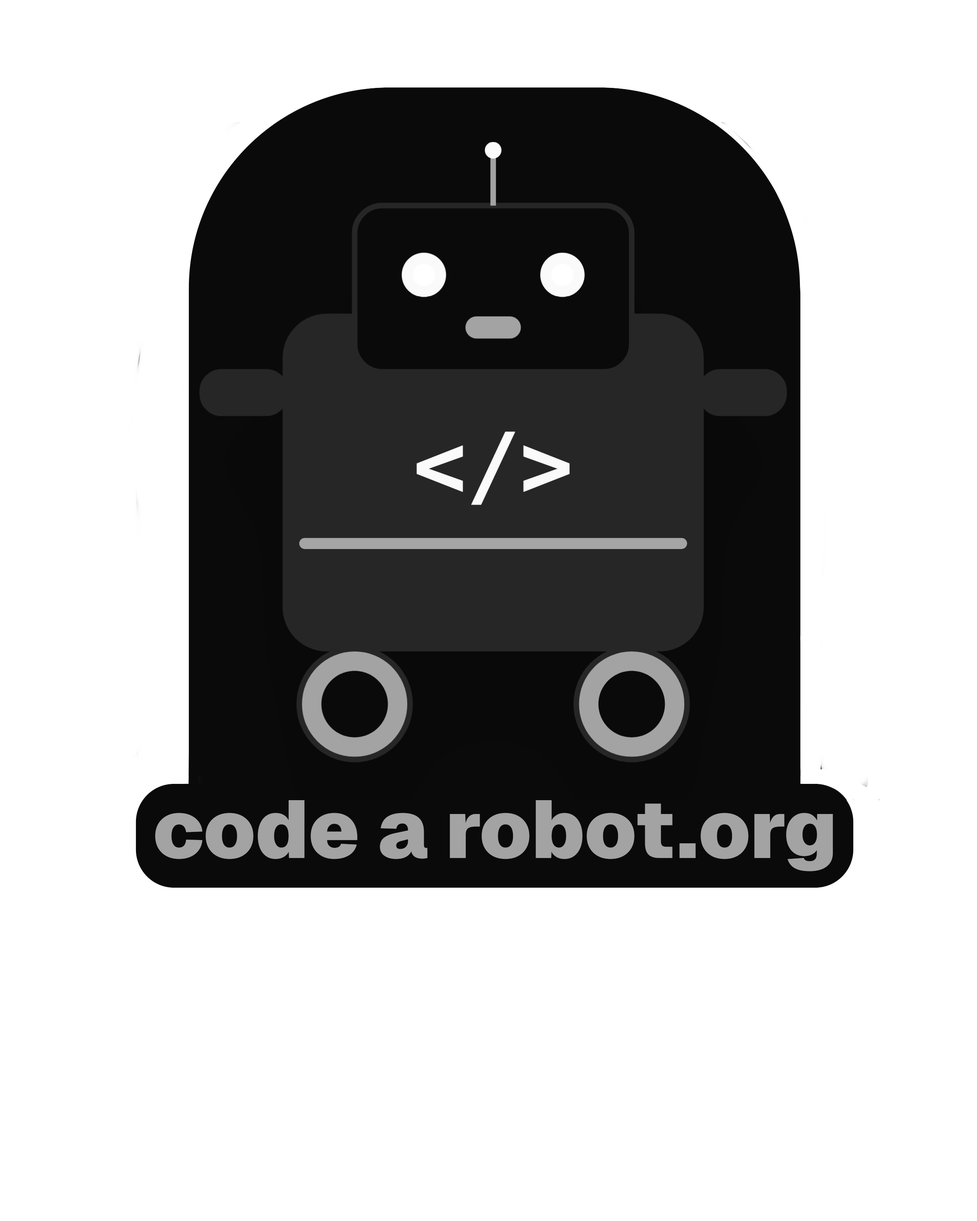
<style>
.page{position:relative;width:977px;height:1221px;background:#ffffff}
.page>*{position:absolute;margin:0}
.t1{font:81.4px "Geist-Black";color:#a3a3a3}
</style>
<div class="page">
<p class="t1" style="left:155px;top:800px;width:678px;height:71px">code a robot.org</p>
</div>
